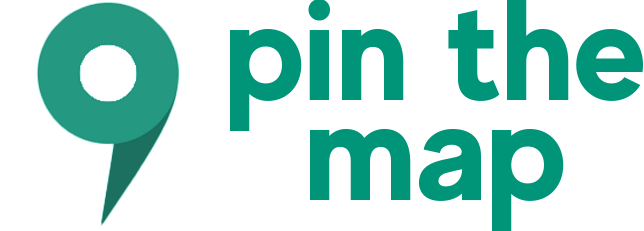
<style>
.page{position:relative;width:644px;height:231px;background:#ffffff}
.page>*{position:absolute;margin:0}
.t1{font:144.4px/100px "MADEEvolveSans-Bold";color:#009579}
</style>
<div class="page">
<p class="t1" style="left:230px;top:0px;width:413px;height:231px;text-align:center">pin the<br>map</p>
</div>
